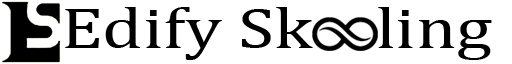
<style>
.page{position:relative;width:512px;height:64px;background:#ffffff}
.page>*{position:absolute;margin:0}
.t1{font:57.6px "Cambria";color:#000000;scale:1.26 1}
</style>
<div class="page">
<p class="t1" style="left:65px;top:7px;width:427px;height:53px">Edify Sk    ling</p>
</div>
